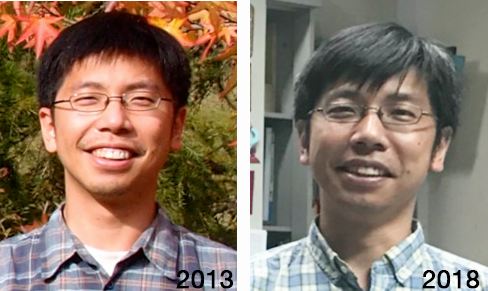
<style>
.page{position:relative;width:488px;height:291px}
.page>*{position:absolute;margin:0}
.t1{font:25px "HelveticaNeue";color:#000000;font-weight:bold}
</style>
<div class="page">
<p class="t1" style="left:176px;top:270px;width:57px;height:19px">2013</p>
<p class="t1" style="left:422px;top:270px;width:58px;height:19px">2018</p>
</div>
